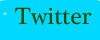
<style>
.page{position:relative;width:100px;height:40px;background:#00d8ff}
.page>*{position:absolute;margin:0}
.t1{font:24px "PlantagenetCherokee";color:#154c04}
</style>
<div class="page">
<p class="t1" style="left:15px;top:7px;width:77px;height:18px">Twitter</p>
</div>
